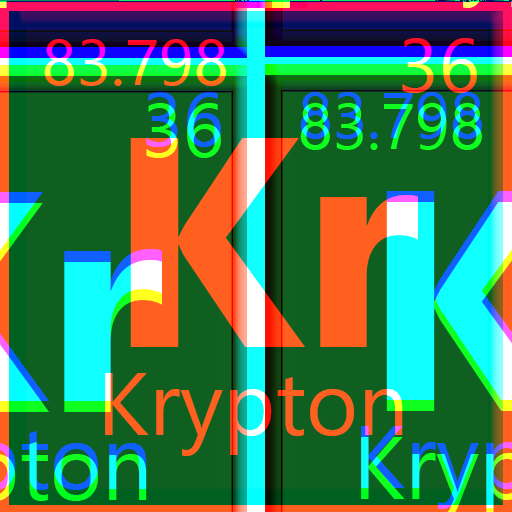
<style>
.page{position:relative;width:512px;height:512px;background:#0f6020}
.page>*{position:absolute;margin:0}
.t1{font:64px "SegoeUI"}
.t2{font:76px "SegoeUI"}
.t3{font:298.7px "SegoeUI-Bold"}
.t4{font:89.3px "SegoeUI"}
</style>
<div class="page">
<p class="t1" style="left:44px;top:37px;width:182px;height:47px">83.798</p>
<p class="t2" style="left:402px;top:36px;width:75px;height:55px">36</p>
<p class="t3" style="left:130px;top:136px;width:288px;height:209px">Kr</p>
<p class="t4" style="left:105px;top:371px;width:298px;height:83px">Krypton</p>
</div>
